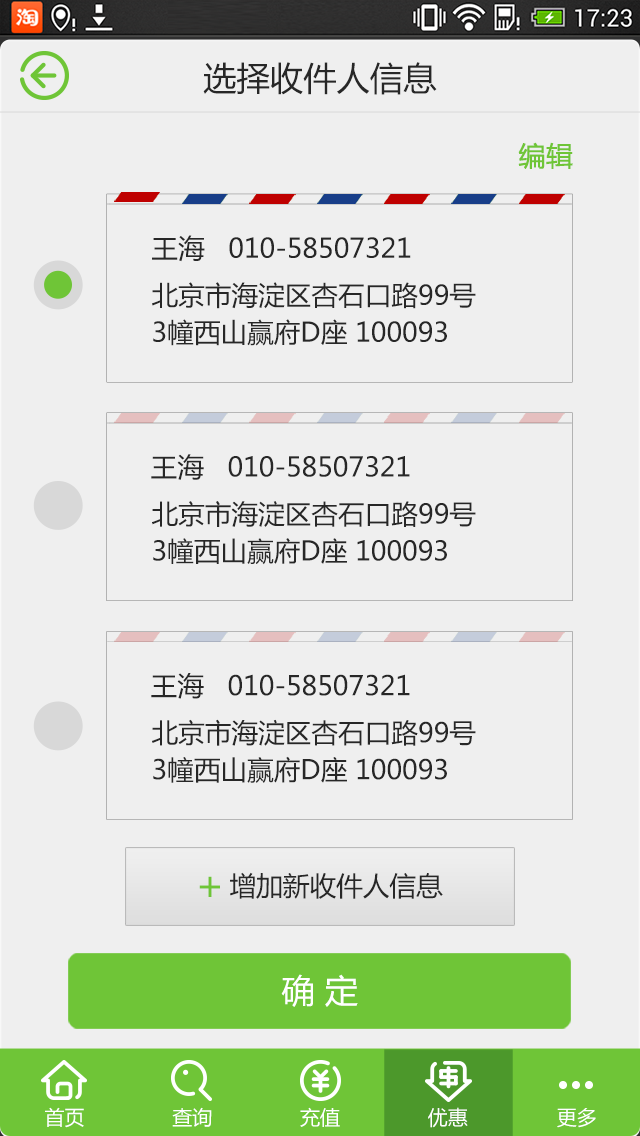
<style>
.page{position:relative;width:640px;height:1136px;background:#efefef}
.page>*{position:absolute;margin:0}
.t1{font:33.3px "MicrosoftYaHei";color:#272727}
.t2{font:26.7px "MicrosoftYaHei";color:#6fc537;font-weight:bold}
.t3{font:26.7px "MicrosoftYaHei";color:#272727}
.t4{font:26.7px/37px "MicrosoftYaHei";color:#272727}
.t5{font:40.7px "MicrosoftYaHei";color:#6fc537}
.t6{font:33.3px "MicrosoftYaHei";color:#ffffff}
.t7{font:20px "MicrosoftYaHei";color:#ffffff}
</style>
<div class="page">
<p class="t1" style="left:203px;top:62px;width:234px;height:33px">选择收件人信息</p>
<p class="t2" style="left:518px;top:142px;width:55px;height:27px">编辑</p>
<p class="t3" style="left:152px;top:235px;width:259px;height:27px">王海   010-58507321</p>
<p class="t4" style="left:152px;top:282px;width:324px;height:64px">北京市海淀区杏石口路99号<br>3幢西山赢府D座 100093</p>
<p class="t3" style="left:151px;top:454px;width:259px;height:26px">王海   010-58507321</p>
<p class="t4" style="left:152px;top:501px;width:324px;height:64px">北京市海淀区杏石口路99号<br>3幢西山赢府D座 100093</p>
<p class="t3" style="left:151px;top:673px;width:259px;height:26px">王海   010-58507321</p>
<p class="t4" style="left:152px;top:719px;width:324px;height:64px">北京市海淀区杏石口路99号<br>3幢西山赢府D座 100093</p>
<p class="t5" style="left:199px;top:876px;width:21px;height:21px">+</p>
<p class="t3" style="left:230px;top:872px;width:213px;height:27px">增加新收件人信息</p>
<p class="t6" style="left:281px;top:974px;width:77px;height:33px">确 定</p>
<p class="t7" style="left:45px;top:1107px;width:39px;height:21px">首页</p>
<p class="t7" style="left:172px;top:1107px;width:40px;height:20px">查询</p>
<p class="t7" style="left:300px;top:1107px;width:40px;height:20px">充值</p>
<p class="t7" style="left:428px;top:1107px;width:40px;height:21px">优惠</p>
<p class="t7" style="left:557px;top:1108px;width:39px;height:20px">更多</p>
</div>
